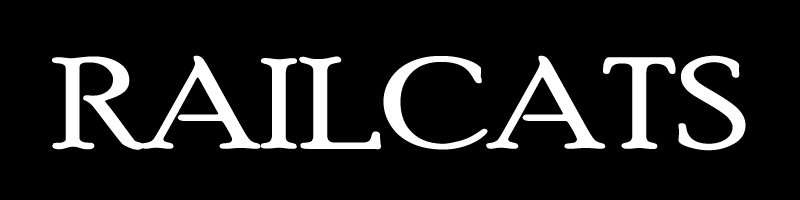
<style>
.page{position:relative;width:800px;height:200px;background:#000000}
.page>*{position:absolute;margin:0}
.t1{font:128px "PoorRichard-Regular";letter-spacing:-0.005em;color:#ffffff;scale:1.25 1}
</style>
<div class="page">
<p class="t1" style="left:52px;top:55px;width:694px;height:96px">RAILCATS</p>
</div>
